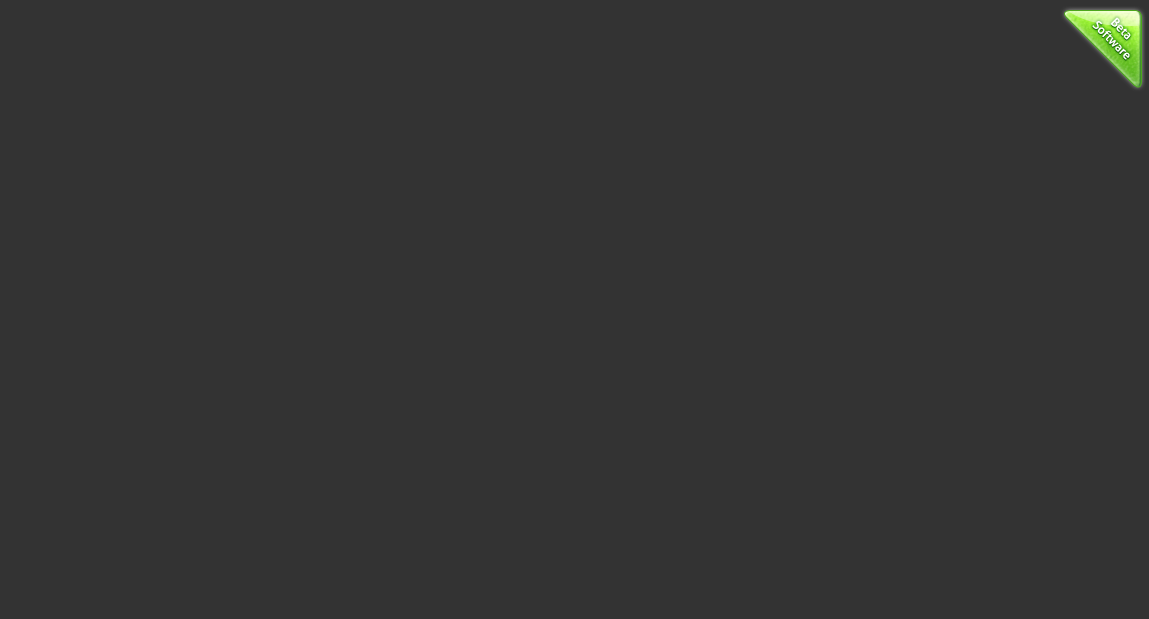
<style>
.page{position:relative;width:1149px;height:619px;background:#333333}
.page>*{position:absolute;margin:0}
.t1{font:12px/10px "Aller";color:#ffffff}
</style>
<div class="page">
<p class="t1" style="left:1092px;top:17px;width:39px;height:43px;text-align:center;rotate:45deg">Beta <br>Software</p>
</div>
